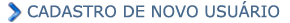
<style>
.page{position:relative;width:290px;height:23px;background:#ffffff}
.page>*{position:absolute;margin:0}
.t1{font:16px "Verdana";color:#49698d}
</style>
<div class="page">
<p class="t1" style="left:27px;top:1px;width:253px;height:17px">CADASTRO DE NOVO USUÁRIO</p>
</div>
